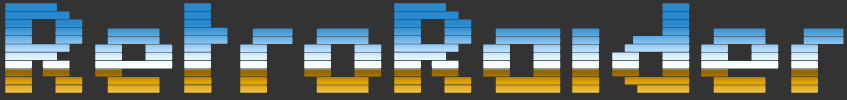
<style>
.page{position:relative;width:847px;height:100px;background:#333333}
.page>*{position:absolute;margin:0}
.t1{font:139.5px "Estrogen"}
</style>
<div class="page">
<p class="t1" style="left:5px;top:3px;width:839px;height:90px">RetroRaider</p>
</div>
